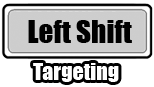
<style>
.page{position:relative;width:154px;height:87px;background:#ffffff}
.page>*{position:absolute;margin:0}
.t1{font:29.3px "Impact";color:#000000}
.t2{font:21.9px "Impact";color:#ffffff}
</style>
<div class="page">
<p class="t1" style="left:28px;top:20px;width:104px;height:23px">Left Shift</p>
<p class="t2" style="left:33px;top:63px;width:86px;height:19px">Targeting</p>
</div>
